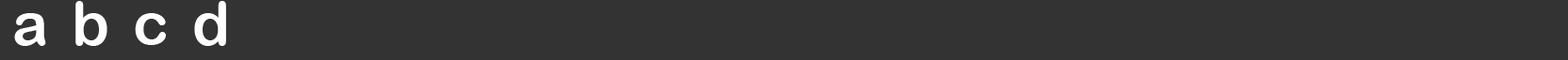
<style>
.page{position:relative;width:1568px;height:60px;background:#333333}
.page>*{position:absolute;margin:0}
.t1{font:60.3px "ArialRoundedMTBold";color:#ffffff}
</style>
<div class="page">
<p class="t1" style="left:75px;top:1px;width:32px;height:45px">b</p>
<p class="t1" style="left:194px;top:1px;width:32px;height:45px">d</p>
<p class="t1" style="left:14px;top:13px;width:32px;height:33px">a</p>
<p class="t1" style="left:135px;top:13px;width:31px;height:32px">c</p>
</div>
